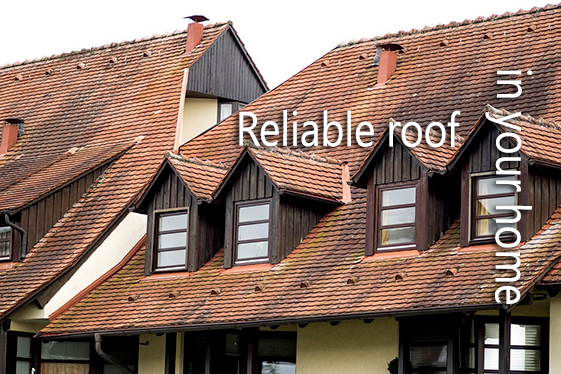
<style>
.page{position:relative;width:561px;height:374px}
.page>*{position:absolute;margin:0}
.t1{font:48px "NirmalaUI";color:#ffffff;scale:0.84 1}
</style>
<div class="page">
<p class="t1" style="left:485px;top:70px;width:48px;height:234px;rotate:90deg">in your home</p>
<p class="t1" style="left:239px;top:110px;width:222px;height:38px">Reliable roof</p>
</div>
